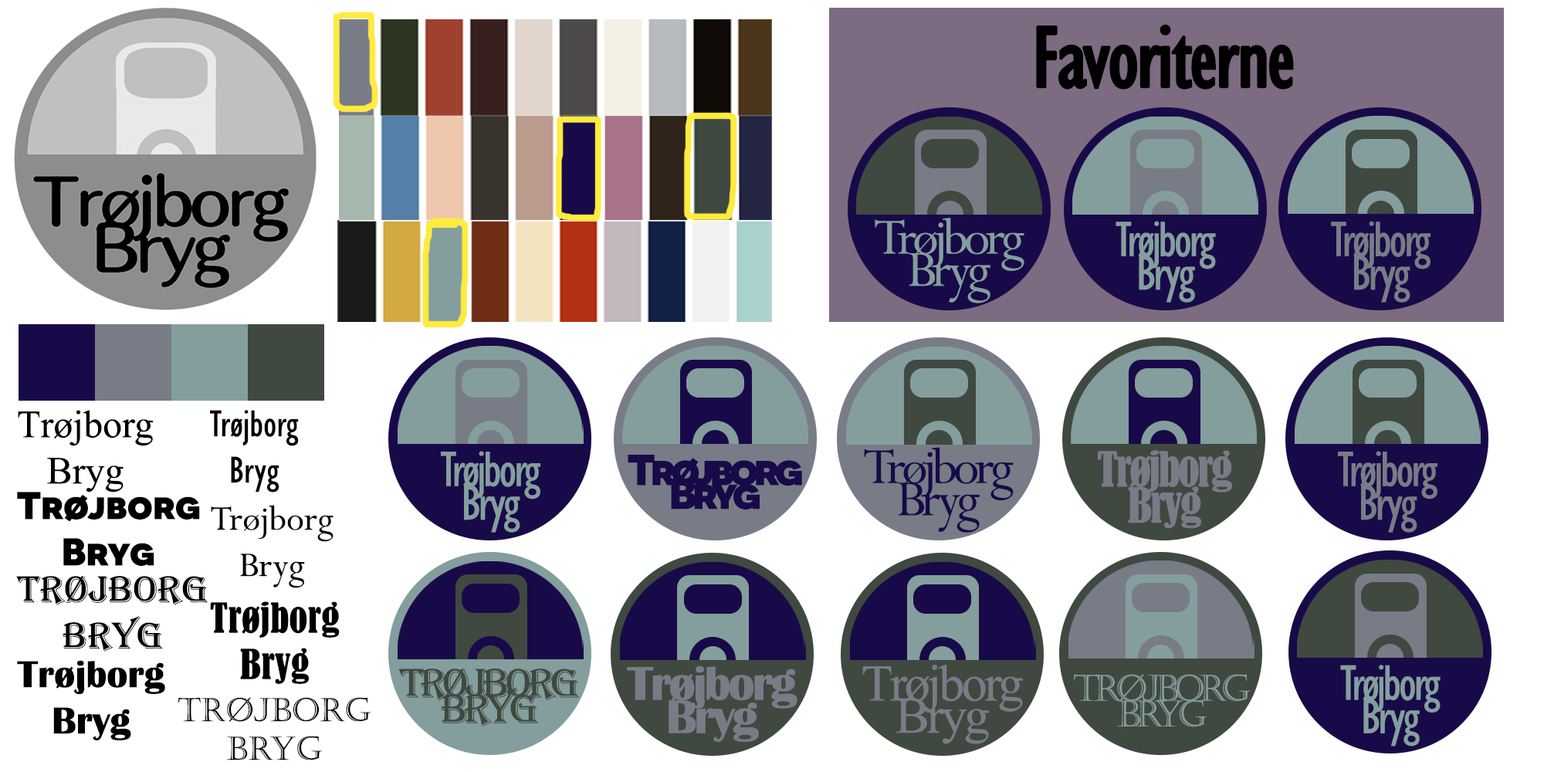
<style>
.page{position:relative;width:1544px;height:772px;background:#ffffff}
.page>*{position:absolute;margin:0}
.t1{font:90.1px "GillSansMT-Condensed";letter-spacing:-0.05em;color:#000000;font-weight:bold}
.t2{font:56.6px/32.2px "Perpetua";letter-spacing:-0.075em;color:#849e9d}
.t3{font:51.5px/33.5px "GillSansMT-Condensed";letter-spacing:-0.05em;color:#849e9d}
.t4{font:51.5px/33.5px "GillSansMT-Condensed";letter-spacing:-0.05em;color:#787c87}
.t5{font:38.6px "MongolianBaiti";color:#000000}
.t6{font:38.6px "GillSansMT-Condensed";color:#000000}
.t7{font:56.6px/32.2px "Perpetua";letter-spacing:-0.075em;color:#180a48}
.t8{font:43.2px/17.3px "Novecentosanswide-UltraBold";letter-spacing:-0.1em;color:#180a48}
.t9{font:43.2px/23.8px "Novecentosanswide-UltraBold";letter-spacing:-0.1em;color:#180a48}
.t10{font:45px/36px "BernardMT-Condensed";letter-spacing:-0.05em;color:#787c87}
.t11{font:38.6px "Novecentosanswide-UltraBold";color:#000000}
.t12{font:38.6px "Perpetua";color:#000000}
.t13{font:38.6px "Algerian";color:#000000}
.t14{font:38.6px "BernardMT-Condensed";color:#000000}
.t15{font:38.6px "BritannicBold";color:#000000}
.t16{font:51.5px/32.2px "MongolianBaiti";letter-spacing:-0.055em;color:#787c87}
.t17{font:42.5px/25.7px "Algerian";letter-spacing:-0.1em;color:#3f4940}
.t18{font:48.9px/33.5px "BritannicBold";letter-spacing:-0.05em;color:#787c87}
.t19{font:36px/25.7px "Castellar";letter-spacing:-0.155em;color:#849e9d}
.t20{font:32.2px "Castellar";color:#000000}
</style>
<div class="page">
<p class="t1" style="left:1036px;top:24px;width:258px;height:66px">Favoriterne</p>
<p class="t2" style="left:875px;top:218px;width:150px;height:85px;text-align:center">Trøjborg<br>Bryg</p>
<p class="t3" style="left:1116px;top:221px;width:100px;height:82px;text-align:center">Trøjborg<br>Bryg</p>
<p class="t4" style="left:1331px;top:221px;width:100px;height:82px;text-align:center">Trøjborg<br>Bryg</p>
<p class="t5" style="left:18px;top:410px;width:135px;height:83px;text-align:center">Trøjborg<br>Bryg</p>
<p class="t6" style="left:210px;top:410px;width:89px;height:83px;text-align:center">Trøjborg<br>Bryg</p>
<p class="t7" style="left:864px;top:447px;width:150px;height:86px;text-align:center">Trøjborg<br>Bryg</p>
<p class="t3" style="left:441px;top:451px;width:100px;height:82px;text-align:center">Trøjborg<br>Bryg</p>
<p class="t8" style="left:628px;top:455px;width:174px;height:55px;text-align:center">Trøjborg<br><span class="t9">Bryg</span></p>
<p class="t10" style="left:1097px;top:450px;width:135px;height:79px;text-align:center">Trøjborg<br>Bryg</p>
<p class="t4" style="left:1338px;top:451px;width:100px;height:82px;text-align:center">Trøjborg<br>Bryg</p>
<p class="t11" style="left:17px;top:492px;width:183px;height:74px;text-align:center">Trøjborg<br>Bryg</p>
<p class="t12" style="left:211px;top:505px;width:123px;height:83px;text-align:center">Trøjborg<br>Bryg</p>
<p class="t13" style="left:16px;top:576px;width:192px;height:76px;text-align:center">Trøjborg<br>Bryg</p>
<p class="t14" style="left:210px;top:602px;width:130px;height:82px;text-align:center">Trøjborg<br>Bryg</p>
<p class="t15" style="left:17px;top:660px;width:148px;height:80px;text-align:center">Trøjborg<br>Bryg</p>
<p class="t16" style="left:862px;top:665px;width:161px;height:79px;text-align:center">Trøjborg<br>Bryg</p>
<p class="t3" style="left:1340px;top:665px;width:101px;height:82px;text-align:center">Trøjborg<br>Bryg</p>
<p class="t17" style="left:398px;top:669px;width:181px;height:58px;text-align:center">Trøjborg<br>Bryg</p>
<p class="t18" style="left:627px;top:666px;width:171px;height:76px;text-align:center">Trøjborg<br>Bryg</p>
<p class="t19" style="left:1074px;top:674px;width:177px;height:53px;text-align:center">Trøjborg<br>Bryg</p>
<p class="t20" style="left:178px;top:697px;width:193px;height:64px;text-align:center">Trøjborg<br>Bryg</p>
</div>
